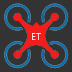
<style>
.page{position:relative;width:72px;height:72px;background:#333333}
.page>*{position:absolute;margin:0}
.t1{font:10px "MicrosoftTaiLe";color:#ffffff;font-variant:small-caps}
</style>
<div class="page">
<p class="t1" style="left:32px;top:33px;width:9px;height:7px">ET</p>
</div>
